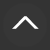
<style>
.page{position:relative;width:50px;height:50px;background:#363636}
.page>*{position:absolute;margin:0}
.t1{font:28.7px "KoreanYNSJG3-R";color:#ffffff}
</style>
<div class="page">
<p class="t1" style="left:12px;top:16px;width:27px;height:13px;rotate:-90deg">&gt;</p>
</div>
